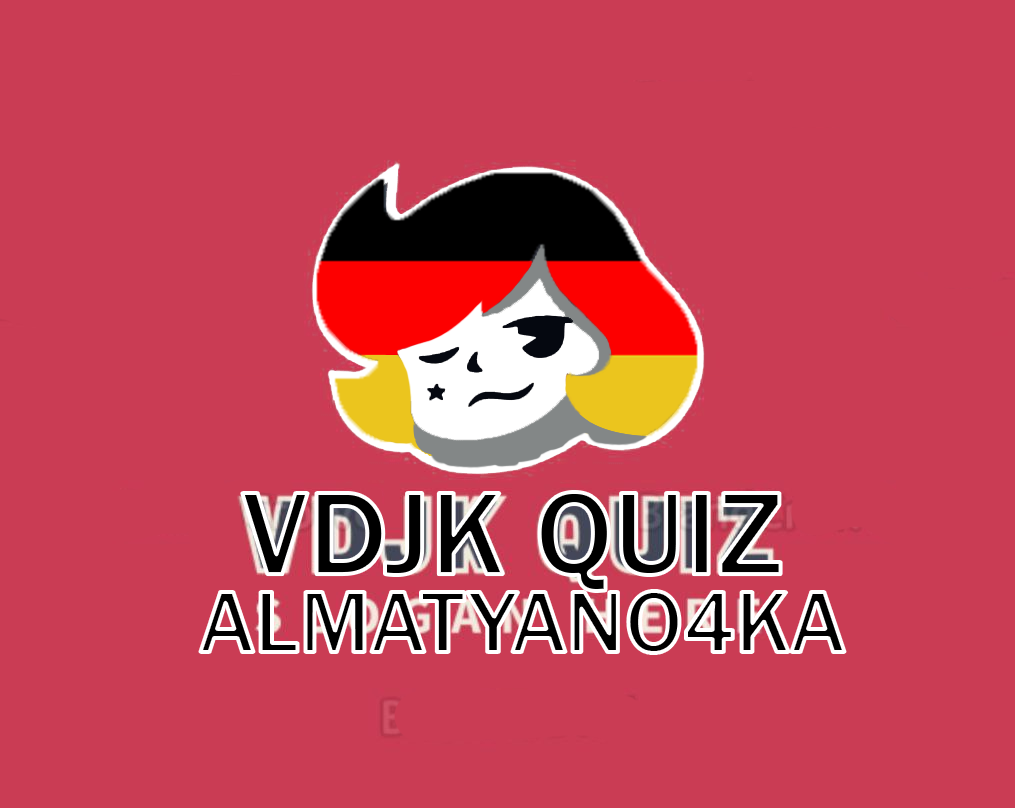
<style>
.page{position:relative;width:1015px;height:808px;background:#ca3c54}
.page>*{position:absolute;margin:0}
.t1{font:121.5px "FranklinGothic-Medium"}
.t2{font:90px "FranklinGothic-Medium"}
</style>
<div class="page">
<p class="t1" style="left:242px;top:492px;width:539px;height:99px">VDJK QUIZ</p>
<p class="t2" style="left:200px;top:591px;width:645px;height:62px">ALMATYANO4KA</p>
</div>
